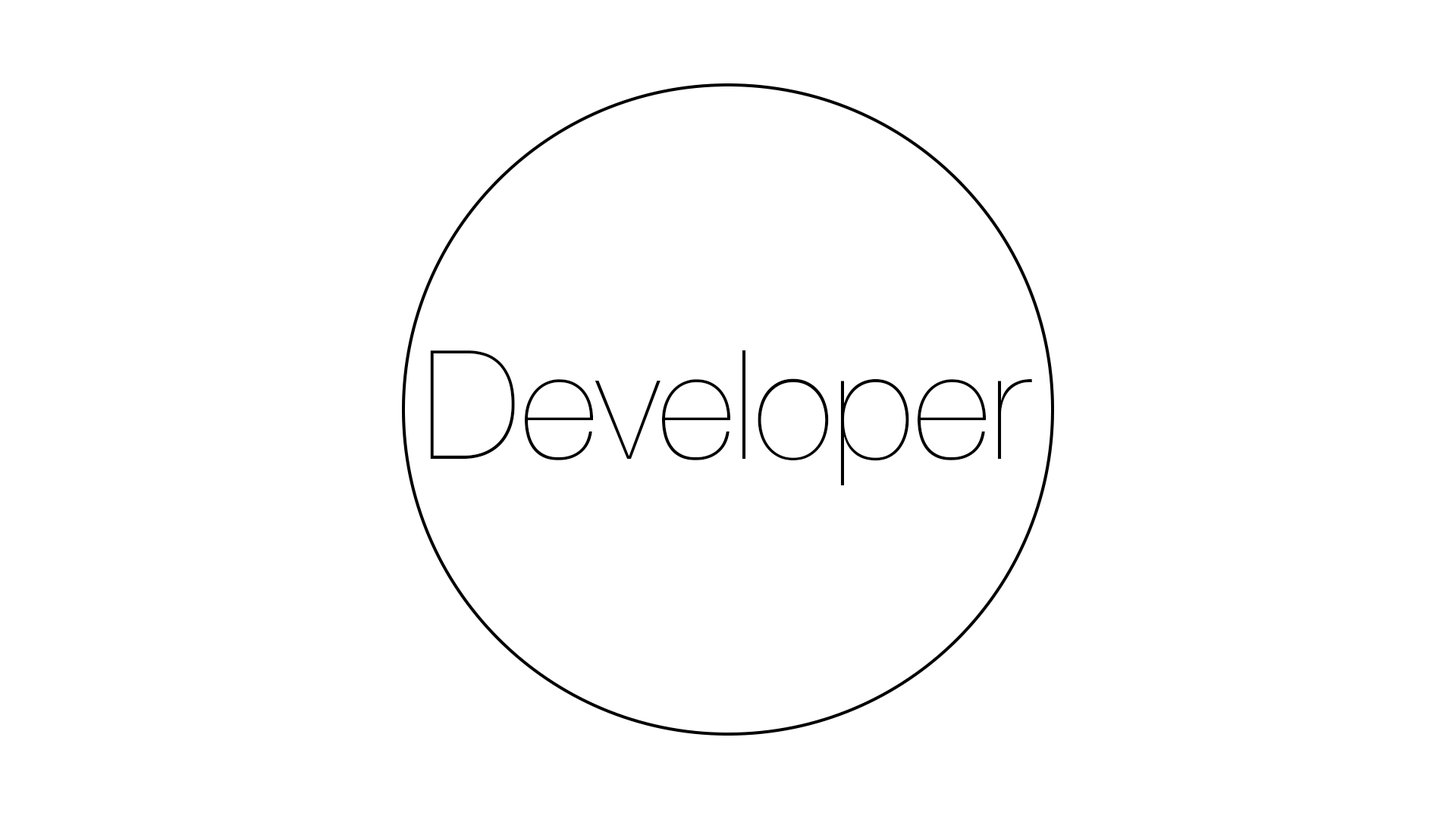
<style>
.page{position:relative;width:1456px;height:819px;background:#ffffff}
.page>*{position:absolute;margin:0}
.t1{font:151.7px "HelveticaNeue-UltraLight";color:#000000}
</style>
<div class="page">
<p class="t1" style="left:430px;top:350px;width:602px;height:135px">Developer</p>
</div>
